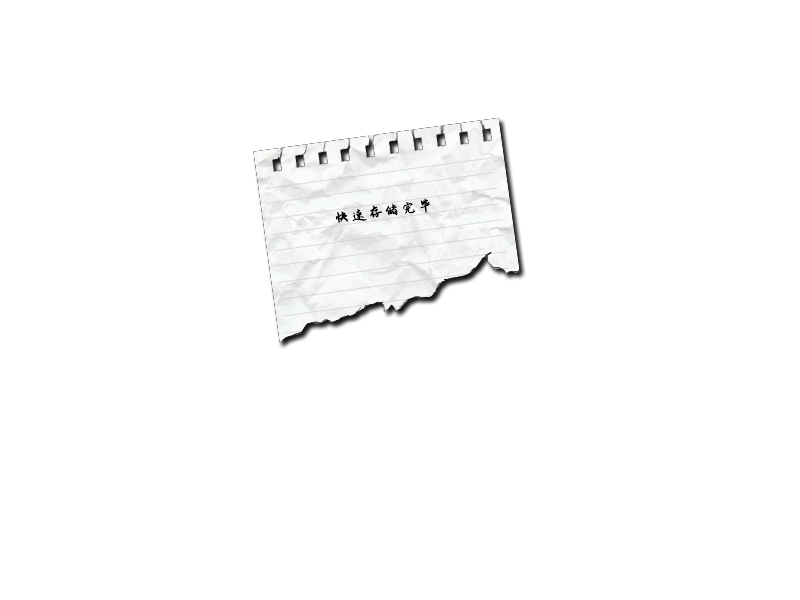
<style>
.page{position:relative;width:800px;height:600px;background:#ffffff}
.page>*{position:absolute;margin:0}
.t1{font:18.8px "slideyouran-Regular";color:#000000}
</style>
<div class="page">
<p class="t1" style="left:335px;top:198px;width:95px;height:25px;rotate:-8deg">快速存储完毕</p>
</div>
